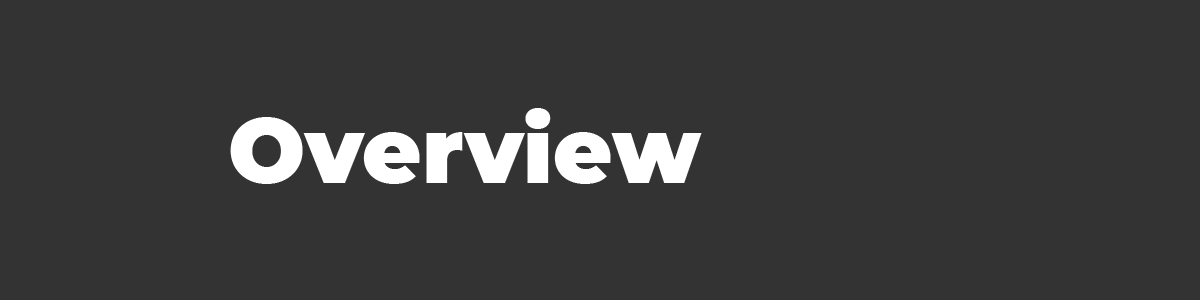
<style>
.page{position:relative;width:1200px;height:300px;background:#333333}
.page>*{position:absolute;margin:0}
.t1{font:91px "Montserrat-Black";color:#ffffff}
</style>
<div class="page">
<p class="t1" style="left:230px;top:108px;width:472px;height:76px">Overview</p>
</div>
